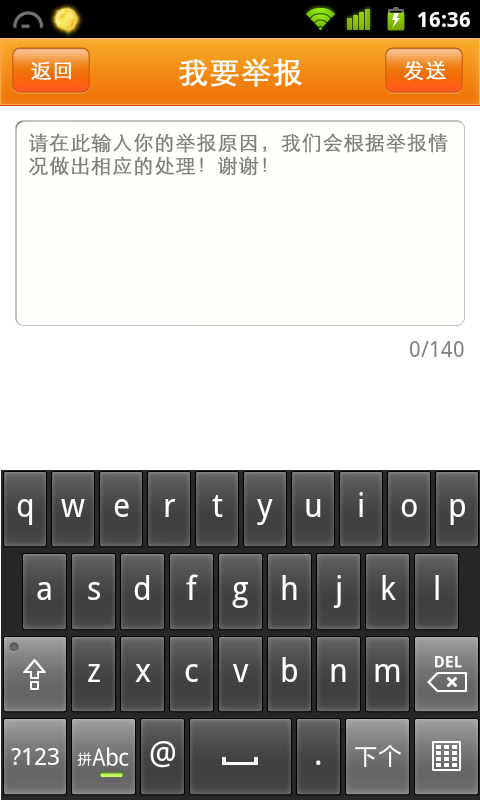
<style>
.page{position:relative;width:480px;height:800px;background:#ffffff}
.page>*{position:absolute;margin:0}
.t1{font:21px "STXihei";letter-spacing:0.025em;color:#ffffff;font-weight:bold}
.t2{font:30px "STXihei";letter-spacing:0.025em;color:#ffffff;font-weight:bold}
.t3{font:20px/4.6px "STXihei";letter-spacing:0.025em;color:#7f7f7f;font-weight:bold}
</style>
<div class="page">
<p class="t1" style="left:31px;top:61px;width:40px;height:19px">返回</p>
<p class="t2" style="left:179px;top:58px;width:123px;height:29px">我要举报</p>
<p class="t1" style="left:404px;top:60px;width:42px;height:21px">发送</p>
<p class="t3" style="left:29px;top:133px;width:419px;height:43px">请在此输入你的举报原因，我们会根据举报情<br><br><br><br><br>况做出相应的处理！谢谢！</p>
</div>
